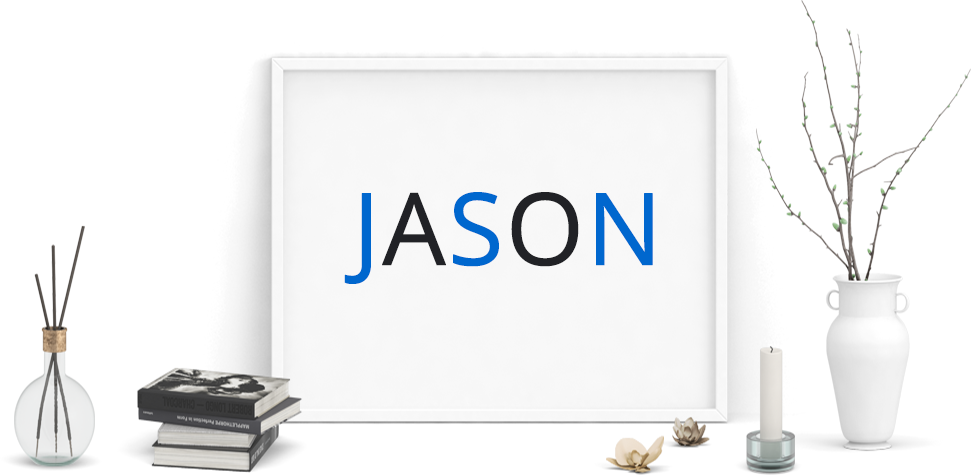
<style>
.page{position:relative;width:971px;height:475px;background:#ffffff}
.page>*{position:absolute;margin:0}
.t1{font:100px "OpenSans";color:#0067ce;font-weight:bold}
.t2{font:100px "OpenSans";color:#212226;font-weight:bold}
</style>
<div class="page">
<p class="t1" style="left:344px;top:192px;width:309px;height:92px">J<span class="t2">A</span>S<span class="t2">O</span>N</p>
</div>
